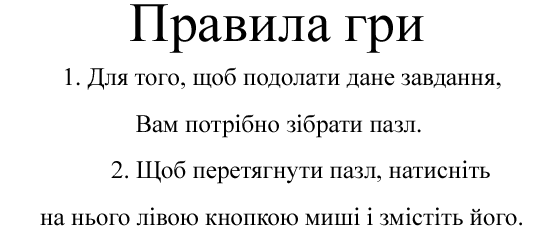
<style>
.page{position:relative;width:551px;height:236px;background:#ffffff}
.page>*{position:absolute;margin:0}
.t1{font:55.6px "TimesNewRomanPSMT";color:#000000}
.t2{font:25px/46.5px "TimesNewRomanPSMT";color:#000000}
</style>
<div class="page">
<p class="t1" style="left:130px;top:4px;width:294px;height:49px">Правила гри</p>
<p class="t2" style="left:40px;top:67px;width:482px;height:159px;text-align:center">1. Для того, щоб подолати дане завдання,<br>Вам потрібно зібрати пазл. <br>       2. Щоб перетягнути пазл, натисніть <br>на нього лівою кнопкою миші і змістіть його.</p>
</div>
